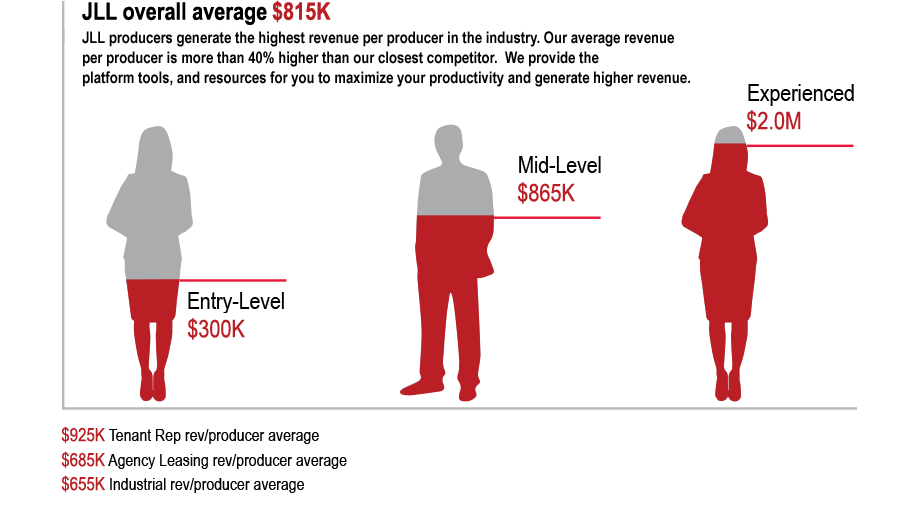
<style>
.page{position:relative;width:920px;height:520px;background:#ffffff}
.page>*{position:absolute;margin:0}
.t1{font:24.2px "ArialNarrow-Bold";color:#000000}
.t2{font:24.2px "ArialNarrow-Bold";color:#ba1f25}
.t3{font:16px/20px "ArialNarrow-Bold";color:#000000}
.t4{font:24.2px "ArialNarrow";color:#ba1f25}
.t5{font:18.4px "ArialNarrow";color:#ba1f25}
</style>
<div class="page">
<p class="t1" style="left:82px;top:2px;width:185px;height:23px">JLL overall average</p>
<p class="t2" style="left:272px;top:0px;width:59px;height:23px">$815K</p>
<p class="t3" style="left:82px;top:31px;width:608px;height:56px">JLL producers generate the highest revenue per producer in the industry. Our average revenue <br>per producer is more than 40% higher than our closest competitor.  We provide the <br>platform tools, and resources for you to maximize your productivity and generate higher revenue.</p>
<p class="t4" style="left:746px;top:110px;width:55px;height:22px">$2.0M</p>
<p class="t4" style="left:517px;top:182px;width:58px;height:22px">$865K</p>
<p class="t4" style="left:187px;top:318px;width:58px;height:22px">$300K</p>
<p class="t5" style="left:61px;top:426px;width:44px;height:18px">$925K</p>
<p class="t5" style="left:61px;top:451px;width:44px;height:18px">$685K</p>
<p class="t5" style="left:61px;top:475px;width:44px;height:18px">$655K</p>
</div>
